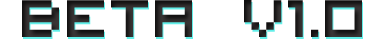
<style>
.page{position:relative;width:386px;height:39px;background:#ffffff}
.page>*{position:absolute;margin:0}
.t1{font:95px "VisitorTT2BRK";color:#2e2d2d}
</style>
<div class="page">
<p class="t1" style="left:22px;top:0px;width:340px;height:37px">BETA v1.0</p>
</div>
